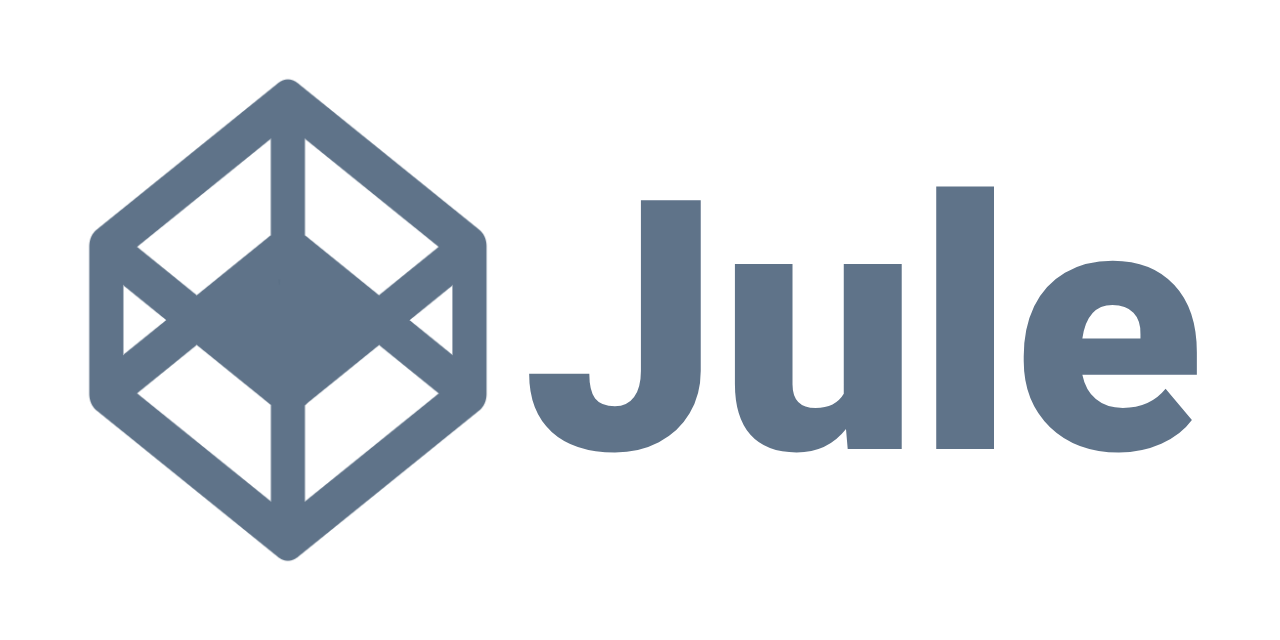
<style>
.page{position:relative;width:1280px;height:640px;background:#ffffff}
.page>*{position:absolute;margin:0}
.t1{font:350px "Roboto-Black";color:#5f7389}
</style>
<div class="page">
<p class="t1" style="left:529px;top:186px;width:668px;height:267px">Jule</p>
</div>
